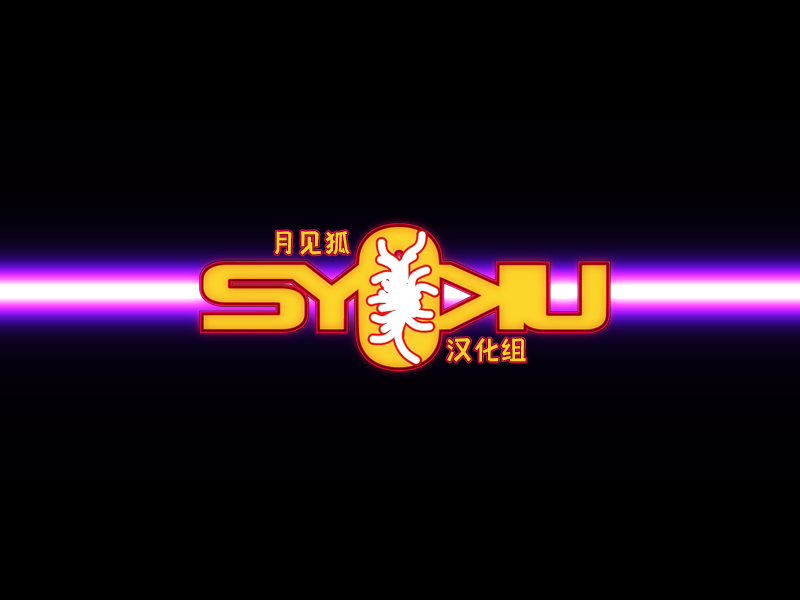
<style>
.page{position:relative;width:800px;height:600px;background:#000000}
.page>*{position:absolute;margin:0}
.t1{font:27.2px "shetumodengxiaofangti";color:#fbd129}
</style>
<div class="page">
<p class="t1" style="left:275px;top:231px;width:75px;height:24px">月见狐</p>
<p class="t1" style="left:447px;top:338px;width:79px;height:24px">汉化组</p>
</div>
